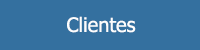
<style>
.page{position:relative;width:200px;height:50px;background:#34709f}
.page>*{position:absolute;margin:0}
.t1{font:20px "Tahoma";color:#fdfdfd}
</style>
<div class="page">
<p class="t1" style="left:67px;top:16px;width:69px;height:17px">Clientes</p>
</div>
